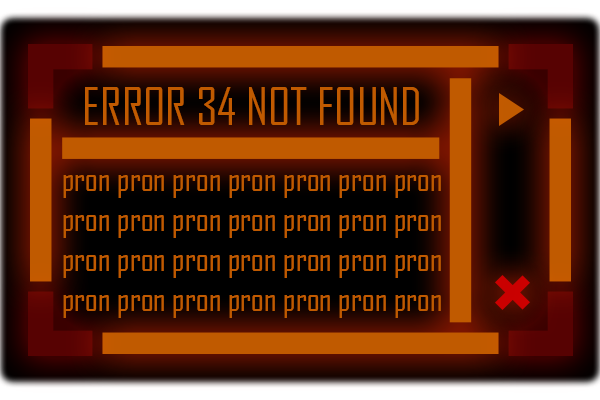
<style>
.page{position:relative;width:600px;height:400px}
.page>*{position:absolute;margin:0}
.t1{font:50px "AgencyFB-Reg";color:#c05a00}
.t2{font:33.3px "AgencyFB-Reg";color:#c05a00}
</style>
<div class="page">
<p class="t1" style="left:85px;top:87px;width:334px;height:38px">ERROR 34 NOT FOUND</p>
<p class="t2" style="left:63px;top:175px;width:378px;height:143px;text-align:center">pron pron pron pron pron pron pron pron pron pron pron pron pron pron pron pron pron pron pron pron pron pron pron pron pron pron pron pron</p>
</div>
